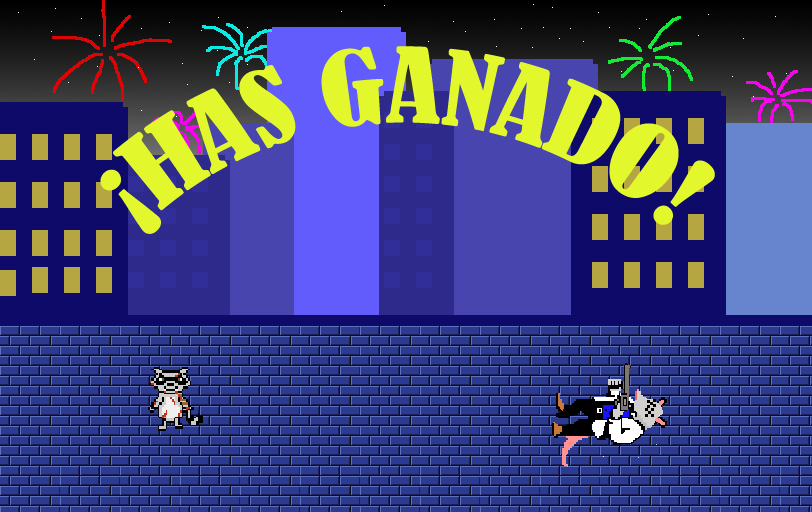
<style>
.page{position:relative;width:812px;height:512px}
.page>*{position:absolute;margin:0}
.t1{font:96px "BernardMT-Condensed";color:#e2f82c}
</style>
<div class="page">
<p class="t1" style="left:100px;top:46px;width:615px;height:188px">¡HAS GANADO!</p>
</div>
